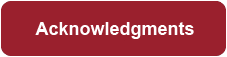
<style>
.page{position:relative;width:227px;height:57px;background:#9a202d}
.page>*{position:absolute;margin:0}
.t1{font:17.8px "Arial-BoldMT";color:#ffffff}
</style>
<div class="page">
<p class="t1" style="left:35px;top:22px;width:159px;height:17px">Acknowledgments</p>
</div>
